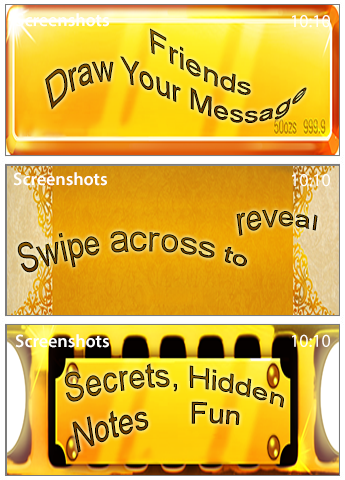
<style>
.page{position:relative;width:345px;height:480px}
.page>*{position:absolute;margin:0}
.t1{font:18px "MyriadPro-Semibold";color:#ffffff}
.t2{font:18px "MyriadPro-Regular";color:#ffffff}
.t3{font:30px "ArialMT"}
.t4{font:36px "ArialMT"}
</style>
<div class="page">
<p class="t1" style="left:15px;top:13px;width:94px;height:14px">Screenshots</p>
<p class="t2" style="left:292px;top:15px;width:38px;height:13px">10:10</p>
<p class="t3" style="left:45px;top:28px;width:262px;height:95px">Friends <br>Draw Your Message</p>
<p class="t1" style="left:13px;top:172px;width:94px;height:14px">Screenshots</p>
<p class="t2" style="left:292px;top:174px;width:38px;height:13px">10:10</p>
<p class="t3" style="left:236px;top:209px;width:82px;height:27px">reveal</p>
<p class="t4" style="left:17px;top:231px;width:230px;height:42px"><span class="t3">Swipe </span>across<span class="t3"> to</span></p>
<p class="t1" style="left:15px;top:334px;width:94px;height:14px">Screenshots</p>
<p class="t2" style="left:292px;top:334px;width:38px;height:13px">10:10</p>
<p class="t3" style="left:64px;top:363px;width:220px;height:90px">Secrets, Hidden <br>Notes     Fun</p>
</div>
